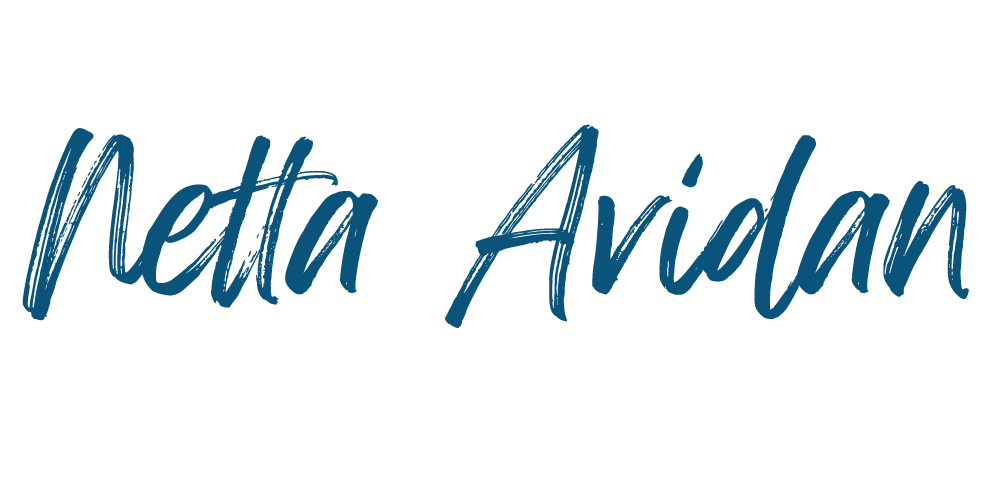
<style>
.page{position:relative;width:1000px;height:500px;background:#ffffff}
.page>*{position:absolute;margin:0}
.t1{font:174.1px "FeelingPassionate-Regular";color:#0a537b}
</style>
<div class="page">
<p class="t1" style="left:22px;top:124px;width:947px;height:204px">Netta Avidan</p>
</div>
